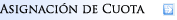
<style>
.page{position:relative;width:177px;height:20px}
.page>*{position:absolute;margin:0}
.t1{font:12px "TrajanPro-Regular";color:#050505}
</style>
<div class="page">
<p class="t1" style="left:0px;top:3px;width:145px;height:11px">Asignación de Cuota</p>
</div>
